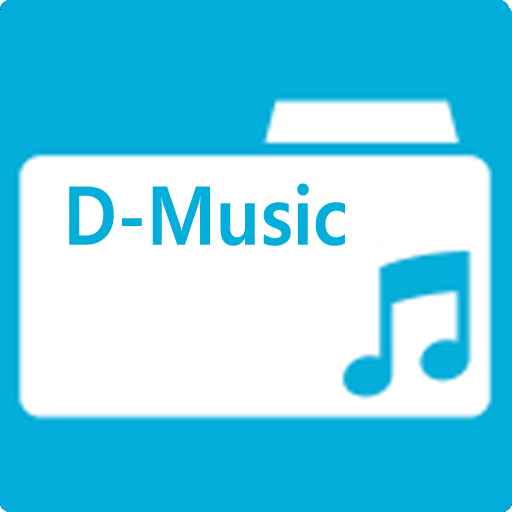
<style>
.page{position:relative;width:512px;height:512px;background:#04aeda}
.page>*{position:absolute;margin:0}
.t1{font:81px "MalgunGothicBold";color:#04aeda;scale:0.89 1}
</style>
<div class="page">
<p class="t1" style="left:69px;top:183px;width:276px;height:63px">D-Music</p>
</div>
